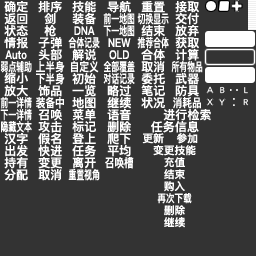
<style>
.page{position:relative;width:256px;height:256px;background:#333333}
.page>*{position:absolute;margin:0}
.t1{font:12px/12px "DFKingGothicSC14-Semibold";letter-spacing:0.005em;color:#ffffff;scale:0.65 1}
.t2{font:12px/12px "DFKingGothicSC14-Semibold";letter-spacing:0.005em;color:#ffffff}
.t3{font:12px/12px "DFKingGothicSC14-Semibold";letter-spacing:0.005em;color:#ffffff;scale:0.8 1}
.t4{font:12px/11.3px "DFKingGothicSC14-Semibold";letter-spacing:0.005em;color:#ffffff;scale:0.65 1}
.t5{font:12px/12.7px "DFKingGothicSC14-Semibold";letter-spacing:0.005em;color:#ffffff}
.t6{font:12px "DFKingGothicSC14-Semibold";letter-spacing:0.005em;color:#ffffff}
.t7{font:10.7px "DFKingGothicSC14-Semibold";letter-spacing:0.005em;color:#ffffff}
.t8{font:10.7px/12px "DFKingGothicSC14-Semibold";letter-spacing:0.005em;color:#ffffff}
.t9{font:10.7px/12px "DFKingGothicSC14-Semibold";letter-spacing:0.005em;color:#ffffff;scale:0.8 1}
</style>
<div class="page">
<p class="t1" style="left:0px;top:1px;width:32px;height:180px;text-align:center"><span class="t2">确定<br>返回<br>状态<br>情报<br></span><span class="t3">Auto<br></span><span class="t4">弱点辅助<br></span><span class="t5">缩小<br></span><span class="t2">放大<br></span>前一详情<br>下一详情<br>隐藏文本<br><span class="t2">汉字<br>出发<br>持有<br>分配</span></p>
<p class="t2" style="left:36px;top:1px;width:29px;height:180px;text-align:center">排序<br>剑<br>枪<br>子弹<br>头部<br><span class="t3">上半身<br>下半身<br></span>饰品<br><span class="t3">装备中<br></span>召唤<br>攻击<br>假名<br>快进<br>变更<br>取消</p>
<p class="t2" style="left:68px;top:1px;width:32px;height:180px;text-align:center">技能<br>装备<br><span class="t3">DNA<br></span><span class="t1">合体记录<br></span>解说<br><span class="t3">自定义<br></span>初始<br>一览<br>地图<br>菜单<br>标记<br>登上<br>任务<br>离开<br><span class="t1">重置视角</span></p>
<p class="t2" style="left:103px;top:1px;width:32px;height:168px;text-align:center">导航<br><span class="t1">前一地图<br>下一地图<br></span><span class="t3">NEW<br>OLD<br></span><span class="t1">全部覆盖<br>对话记录<br></span>略过<br>继续<br>语音<br>删除<br>爬下<br>平均<br><span class="t3">召唤槽</span></p>
<p class="t2" style="left:137px;top:1px;width:32px;height:108px;text-align:center">重置<br><span class="t1">切换显示<br></span>结束<br><span class="t1">推荐合体<br></span>合体<br>取消<br>委托<br>笔记<br>状况</p>
<p class="t2" style="left:171px;top:1px;width:32px;height:108px;text-align:center">接取<br>交付<br>放弃<br>获取<br>计算<br><span class="t1">所有物品<br></span>武器<br>防具<br><span class="t3">消耗品</span></p>
<p class="t6" style="left:163px;top:109px;width:48px;height:12px">进行检索</p>
<p class="t6" style="left:151px;top:121px;width:48px;height:12px">任务信息</p>
<p class="t7" style="left:142px;top:133px;width:22px;height:11px">更新</p>
<p class="t7" style="left:176px;top:133px;width:22px;height:11px">参加</p>
<p class="t8" style="left:153px;top:145px;width:43px;height:83px;text-align:center">变更技能<br>充值<br>结束<br>购入<br><span class="t9">再次下载<br></span>删除<br>继续</p>
</div>
